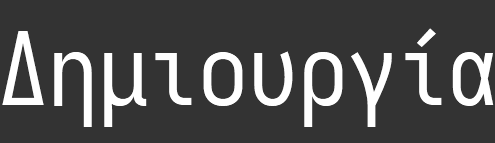
<style>
.page{position:relative;width:495px;height:143px;background:#333333}
.page>*{position:absolute;margin:0}
.t1{font:100px "Iosevka";color:#ffffff}
</style>
<div class="page">
<p class="t1" style="left:2px;top:28px;width:492px;height:99px">Δημιουργία</p>
</div>
